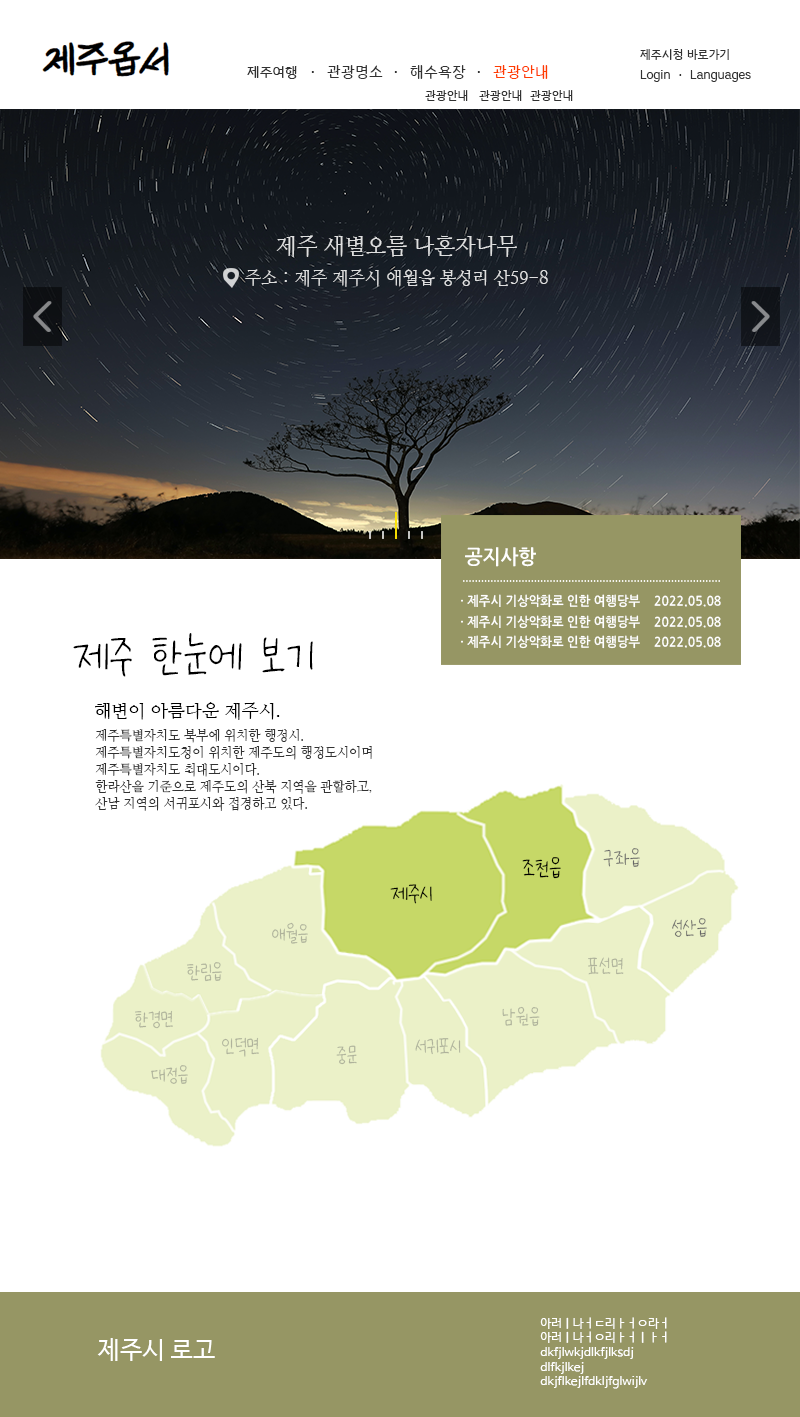
<style>
.page{position:relative;width:800px;height:1417px;background:#ffffff}
.page>*{position:absolute;margin:0}
.t1{font:12px "MapoPeacefull";color:#323232}
.t2{font:15.5px "MapoPeacefull";color:#323232}
.t3{font:15.5px "MapoPeacefull";color:#ff3c00}
.t4{font:14px "MapoPeacefull";color:#323232}
.t5{font:18px/30px "NanumMyeongjo";color:#dedfdf;scale:0.95 1}
.t6{font:23px/30px "NanumMyeongjo";color:#dedfdf;scale:0.95 1}
.t7{font:20px "NanumGothicBold";color:#ffffff;scale:0.95 1}
.t8{font:13px "NanumGothicBold";color:#ffffff;scale:0.95 1}
.t9{font:60px "NanumBaeEunHyeCe";color:#000000}
.t10{font:18px "NanumMyeongjo";color:#000000}
.t11{font:13px/17px "NanumMyeongjo";color:#323232}
.t12{font:29px "NanumBaeEunHyeCe";color:#000000}
.t13{font:25.6px "NanumBaeEunHyeCe";color:#666666}
.t14{font:25.6px "NanumBaeEunHyeCe";color:#afb29b}
.t15{font:12px/14.6px "NanumBarunGothic-YetHangul";color:#ffffff}
.t16{font:25px "NanumBarunGothic-YetHangul";color:#ffffff}
</style>
<div class="page">
<p class="t1" style="left:640px;top:49px;width:89px;height:11px">제주시청 바로가기</p>
<p class="t2" style="left:327px;top:65px;width:56px;height:14px">관광명소</p>
<p class="t2" style="left:410px;top:65px;width:56px;height:14px">해수욕장</p>
<p class="t3" style="left:493px;top:65px;width:55px;height:14px">관광안내</p>
<p class="t4" style="left:247px;top:66px;width:50px;height:13px">제주여행</p>
<p class="t4" style="left:311px;top:71px;width:3px;height:2px">·</p>
<p class="t4" style="left:394px;top:71px;width:3px;height:2px">·</p>
<p class="t4" style="left:477px;top:71px;width:3px;height:2px">·</p>
<p class="t1" style="left:640px;top:70px;width:111px;height:12px">Login  ·  Languages</p>
<p class="t1" style="left:425px;top:90px;width:43px;height:11px">관광안내</p>
<p class="t1" style="left:479px;top:90px;width:43px;height:11px">관광안내</p>
<p class="t1" style="left:530px;top:90px;width:43px;height:11px">관광안내</p>
<p class="t5" style="left:245px;top:235px;width:303px;height:52px;text-align:center"><span class="t6">제주 새별오름 나혼자나무<br></span>주소 : 제주 제주시 애월읍 봉성리 산59-8</p>
<p class="t7" style="left:465px;top:547px;width:71px;height:20px">공지사항</p>
<p class="t8" style="left:461px;top:594px;width:260px;height:14px">· 제주시 기상악화로 인한 여행당부    2022.05.08</p>
<p class="t8" style="left:461px;top:615px;width:260px;height:14px">· 제주시 기상악화로 인한 여행당부    2022.05.08</p>
<p class="t9" style="left:73px;top:633px;width:240px;height:44px">제주 한눈에 보기</p>
<p class="t8" style="left:461px;top:635px;width:260px;height:14px">· 제주시 기상악화로 인한 여행당부    2022.05.08</p>
<p class="t10" style="left:95px;top:702px;width:185px;height:18px">해변이 아름다운 제주시.</p>
<p class="t11" style="left:95px;top:729px;width:277px;height:82px">제주특별자치도 북부에 위치한 행정시. <br>제주특별자치도청이 위치한 제주도의 행정도시이며<br>제주특별자치도 최대도시이다. <br>한라산을 기준으로 제주도의 산북 지역을 관할하고, <br>산남 지역의 서귀포시와 접경하고 있다.</p>
<p class="t12" style="left:522px;top:857px;width:39px;height:22px">조천읍</p>
<p class="t13" style="left:603px;top:848px;width:37px;height:19px">구좌읍</p>
<p class="t12" style="left:390px;top:884px;width:42px;height:20px">제주시</p>
<p class="t13" style="left:672px;top:918px;width:35px;height:19px">성산읍</p>
<p class="t14" style="left:272px;top:922px;width:36px;height:22px">애월읍</p>
<p class="t14" style="left:187px;top:962px;width:35px;height:20px">한림읍</p>
<p class="t14" style="left:588px;top:957px;width:36px;height:18px">표선면</p>
<p class="t14" style="left:135px;top:1010px;width:38px;height:19px">한경면</p>
<p class="t14" style="left:502px;top:1006px;width:38px;height:20px">남원읍</p>
<p class="t14" style="left:222px;top:1037px;width:37px;height:20px">인덕면</p>
<p class="t14" style="left:415px;top:1038px;width:46px;height:17px">서귀포시</p>
<p class="t14" style="left:336px;top:1045px;width:21px;height:20px">중문</p>
<p class="t14" style="left:151px;top:1065px;width:37px;height:19px">대정읍</p>
<p class="t15" style="left:540px;top:1317px;width:127px;height:72px">아러ㅣ나ㅓㄷ리ㅏㅓㅇ라ㅓ<br>아러ㅣ나ㅓㅇ리ㅏㅓㅣㅏㅓ<br>dkfjlwkjdlkfjlksdj<br>dlfkjlkej<br>dkjflkejlfdkljfglwijlv</p>
<p class="t16" style="left:97px;top:1338px;width:118px;height:23px">제주시 로고</p>
</div>
